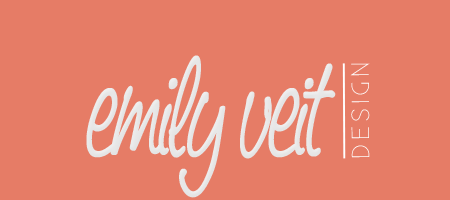
<style>
.page{position:relative;width:450px;height:200px;background:#e67c66}
.page>*{position:absolute;margin:0}
.t1{font:125.1px "SaginawBold";letter-spacing:-0.02em;color:#e7e7e7;scale:0.71 1}
.t2{font:24.8px "Existence-Light";letter-spacing:0.14em;color:#ffffff;scale:1.11 1}
</style>
<div class="page">
<p class="t1" style="left:86px;top:55px;width:250px;height:143px">emily veit</p>
<p class="t2" style="left:350px;top:63px;width:20px;height:95px;rotate:-90deg">DESIGN</p>
</div>
